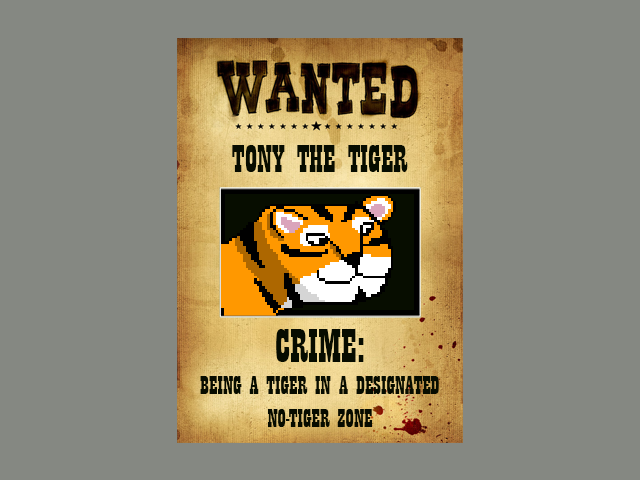
<style>
.page{position:relative;width:640px;height:480px;background:#858882}
.page>*{position:absolute;margin:0}
.t1{font:40px "Playbill";color:#070c00}
.t2{font:27px "Playbill";color:#070c00}
.t3{font:50px "Playbill";color:#070c00}
</style>
<div class="page">
<p class="t1" style="left:232px;top:145px;width:176px;height:27px">TONY THE TIGER</p>
<p class="t2" style="left:200px;top:329px;width:239px;height:98px;text-align:center"><span class="t3">CRIME:<br></span>BEING A TIGER IN A DESIGNATED NO-TIGER ZONE</p>
</div>
